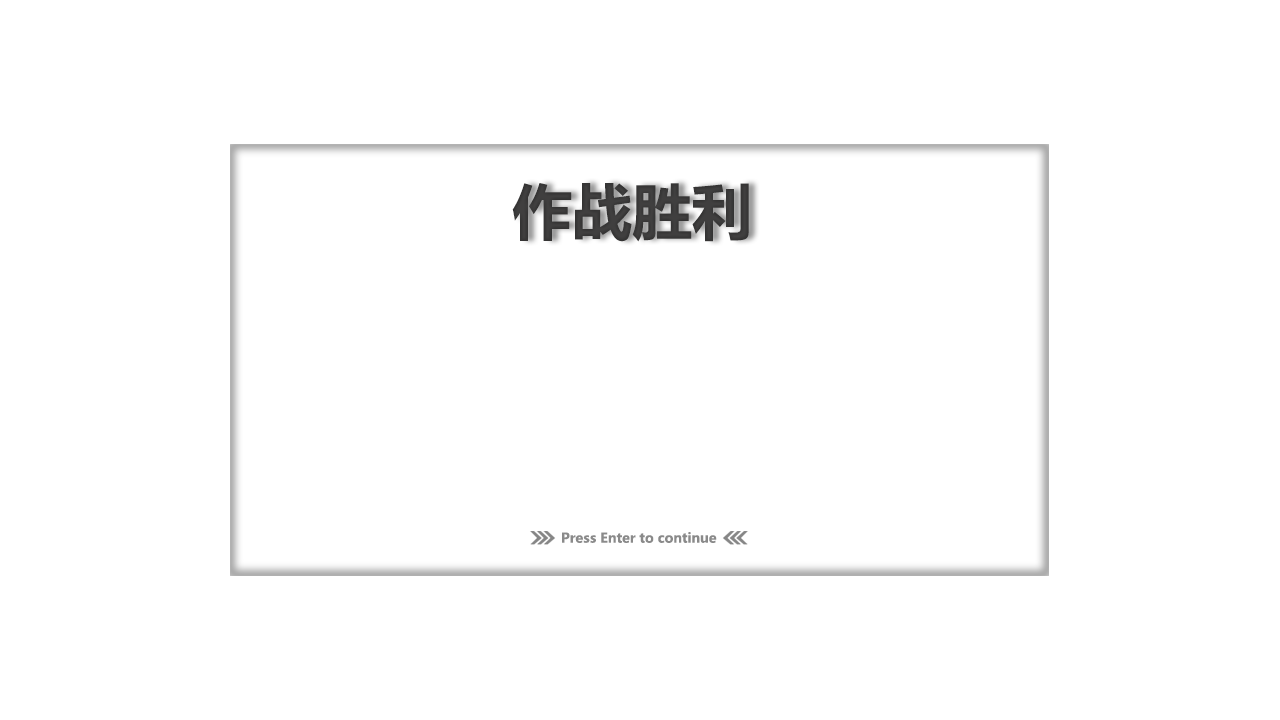
<style>
.page{position:relative;width:1280px;height:720px;background:#ffffff}
.page>*{position:absolute;margin:0}
.t1{font:60px "MicrosoftYaHei-Bold";color:#403f3f}
.t2{font:13.3px "MicrosoftYaHei-Bold";color:#8a8a8a}
</style>
<div class="page">
<p class="t1" style="left:512px;top:183px;width:237px;height:59px">作战胜利</p>
<p class="t2" style="left:562px;top:532px;width:155px;height:11px">Press Enter to continue</p>
</div>
